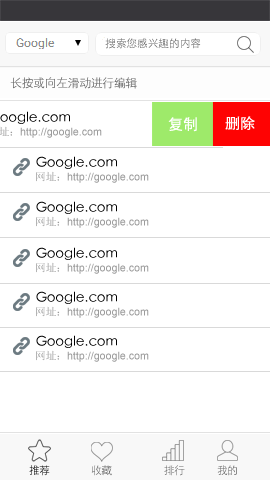
<style>
.page{position:relative;width:270px;height:480px;background:#ffffff}
.page>*{position:absolute;margin:0}
.t1{font:10.7px "STXihei";color:#676767}
.t2{font:12px "STXihei";letter-spacing:-0.04em;color:#676767}
.t3{font:14.7px "STXihei";color:#ffffff;font-weight:bold}
.t4{font:10.7px "STXihei";letter-spacing:-0.04em}
.t5{font:10.7px "STXihei";letter-spacing:-0.04em;color:#676767}
</style>
<div class="page">
<p class="t1" style="left:105px;top:38px;width:96px;height:11px">搜索您感兴趣的内容</p>
<p class="t2" style="left:10px;top:77px;width:127px;height:12px">长按或向左滑动进行编辑</p>
<p class="t3" style="left:168px;top:117px;width:29px;height:15px">复制</p>
<p class="t3" style="left:225px;top:116px;width:30px;height:14px">删除</p>
<p class="t4" style="left:29px;top:465px;width:21px;height:11px">推荐</p>
<p class="t5" style="left:91px;top:465px;width:21px;height:11px">收藏</p>
<p class="t4" style="left:164px;top:465px;width:21px;height:11px">排行</p>
<p class="t4" style="left:217px;top:465px;width:20px;height:11px">我的</p>
</div>
